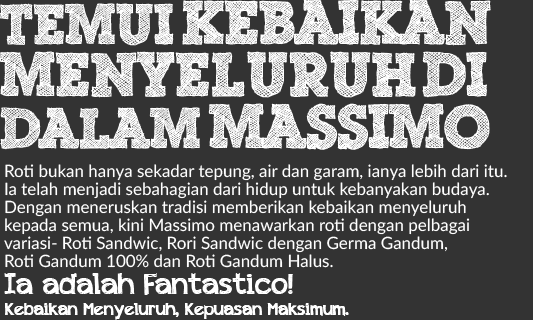
<style>
.page{position:relative;width:533px;height:320px;background:#333333}
.page>*{position:absolute;margin:0}
.t1{font:60px/52px "ScribbleBoxDEMO";color:#ffffff}
.t2{font:55px/52px "ScribbleBoxDEMO";color:#ffffff}
.t3{font:17px/18px "Lato-Regular";color:#ffffff}
.t4{font:18px/21px "appleberry";color:#ffffff}
.t5{font:30px/21px "appleberry";color:#ffffff}
</style>
<div class="page">
<p class="t1" style="left:0px;top:0px;width:491px;height:150px"><span class="t2">Temui </span>kebaikan <br>menyeluruh di <br><span class="t2">dalam</span> Massimo</p>
<p class="t3" style="left:4px;top:164px;width:503px;height:104px">Roti bukan hanya sekadar tepung, air dan garam, ianya lebih dari itu. <br>Ia telah menjadi sebahagian dari hidup untuk kebanyakan budaya. <br>Dengan meneruskan tradisi memberikan kebaikan menyeluruh <br>kepada semua, kini Massimo menawarkan roti dengan pelbagai <br>variasi- Roti Sandwic, Rori Sandwic dengan Germa Gandum, <br>Roti Gandum 100% dan Roti Gandum Halus.</p>
<p class="t4" style="left:4px;top:273px;width:345px;height:47px"><span class="t5">Ia adalah Fantastico! <br></span>Kebaikan Menyeluruh, Kepuasan Maksimum.</p>
</div>
